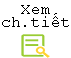
<style>
.page{position:relative;width:71px;height:58px;background:#ffffff}
.page>*{position:absolute;margin:0}
.t1{font:12px/13.3px "CourierNewPSMT";color:#000000}
</style>
<div class="page">
<p class="t1" style="left:2px;top:5px;width:67px;height:22px;text-align:center">Xem<br>ch.tiết</p>
</div>
